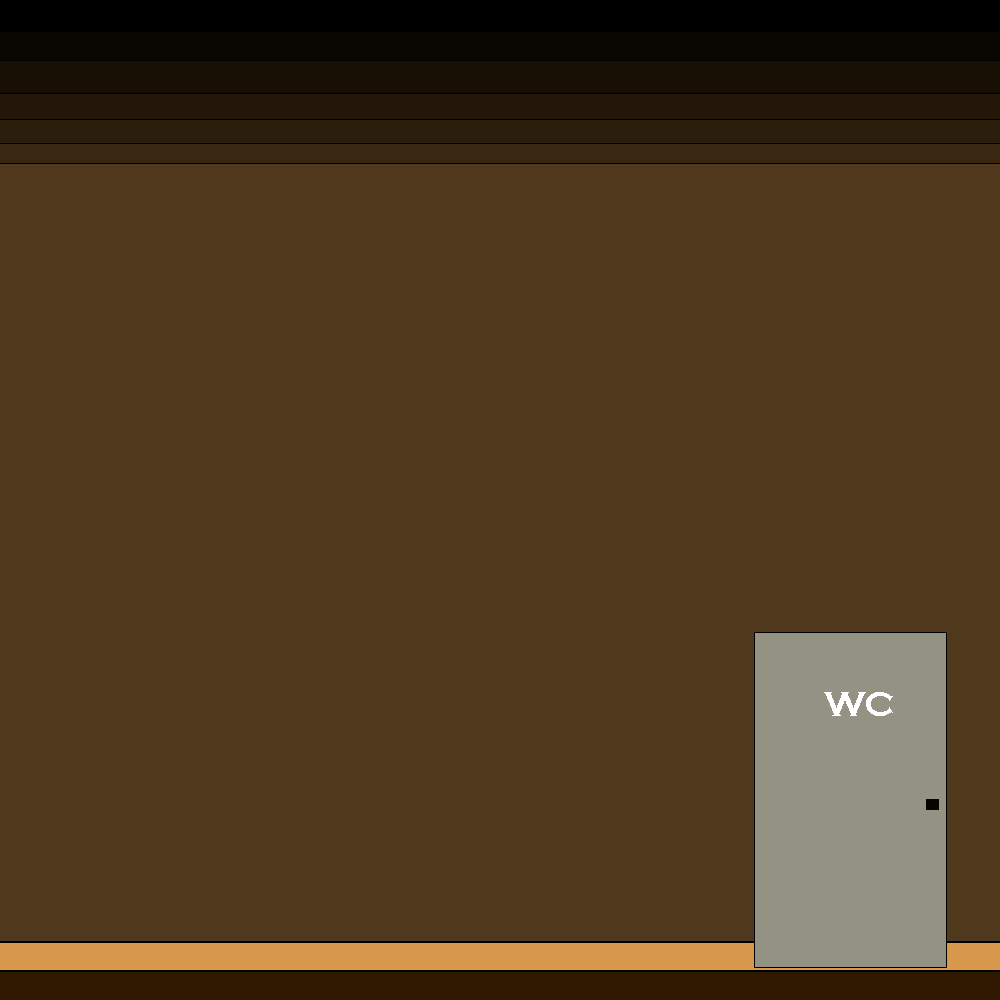
<style>
.page{position:relative;width:1000px;height:1000px;background:#4f381c}
.page>*{position:absolute;margin:0}
.t1{font:36px "CopperplateGothic-Bold";color:#ffffff}
</style>
<div class="page">
<p class="t1" style="left:824px;top:692px;width:69px;height:24px">WC</p>
</div>
